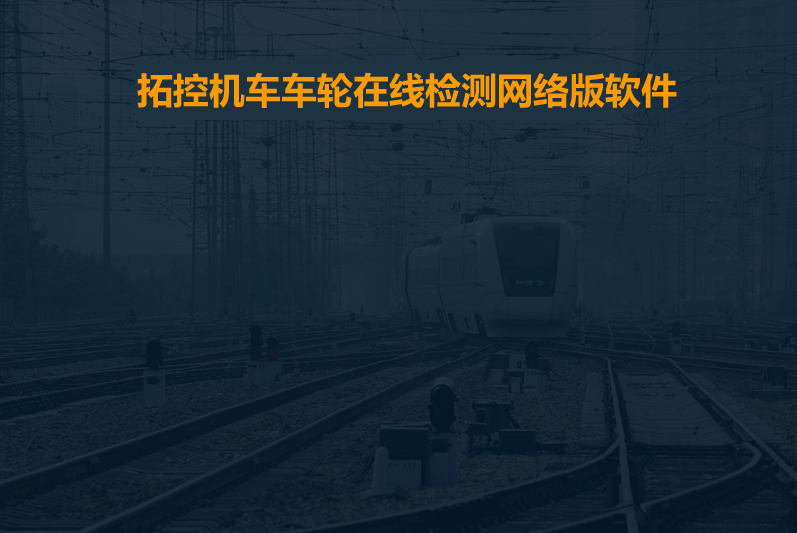
<style>
.page{position:relative;width:797px;height:533px}
.page>*{position:absolute;margin:0}
.t1{font:36px "MicrosoftYaHei-Bold";color:#fc9a01}
</style>
<div class="page">
<p class="t1" style="left:137px;top:72px;width:540px;height:36px">拓控机车车轮在线检测网络版软件</p>
</div>
